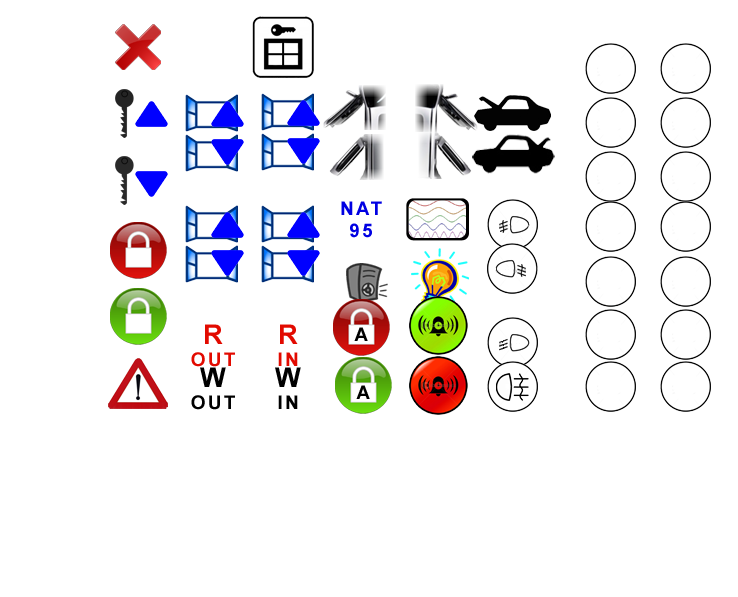
<style>
.page{position:relative;width:738px;height:597px;background:#ffffff}
.page>*{position:absolute;margin:0}
.t1{font:18.8px/22px "Arial-BoldMT";letter-spacing:0.12em;color:#0000e2}
.t2{font:18.8px/22px "Arial-BoldMT";letter-spacing:0.12em;color:#e20a00}
.t3{font:27.1px/22px "Arial-BoldMT";letter-spacing:0.12em;color:#e20a00}
.t4{font:18.8px "Arial-BoldMT";letter-spacing:0.12em;color:#000000}
.t5{font:18.8px/22px "Arial-BoldMT";letter-spacing:0.12em;color:#000000}
.t6{font:27.1px/22px "Arial-BoldMT";letter-spacing:0.12em;color:#000000}
</style>
<div class="page">
<p class="t1" style="left:341px;top:201px;width:41px;height:37px;text-align:center">NAT<br>95</p>
<p class="t2" style="left:191px;top:324px;width:44px;height:43px;text-align:center"><span class="t3">R<br></span>OUT</p>
<p class="t2" style="left:278px;top:324px;width:20px;height:42px;text-align:center"><span class="t3">R<br></span>IN</p>
<p class="t4" style="left:354px;top:327px;width:14px;height:14px">A</p>
<p class="t5" style="left:191px;top:367px;width:44px;height:43px;text-align:center"><span class="t6">W<br></span>OUT</p>
<p class="t5" style="left:275px;top:367px;width:26px;height:42px;text-align:center"><span class="t6">W<br></span>IN</p>
<p class="t4" style="left:356px;top:385px;width:14px;height:14px">A</p>
</div>
